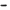
<style>
.page{position:relative;width:10px;height:10px;background:#ffffff}
.page>*{position:absolute;margin:0}
.t1{font:14px "ArialRoundedMTBold";color:#1d1d1d;scale:1.49 1}
</style>
<div class="page">
<p class="t1" style="left:0px;top:4px;width:7px;height:3px">-</p>
</div>
